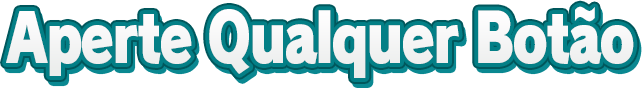
<style>
.page{position:relative;width:642px;height:88px;background:#ffffff}
.page>*{position:absolute;margin:0}
.t1{font:67.1px "RodinPro-UB";letter-spacing:-0.044em;color:#f5f5f5;scale:0.8 1}
</style>
<div class="page">
<p class="t1" style="left:6px;top:6px;width:628px;height:72px">Aperte Qualquer Botão</p>
</div>
